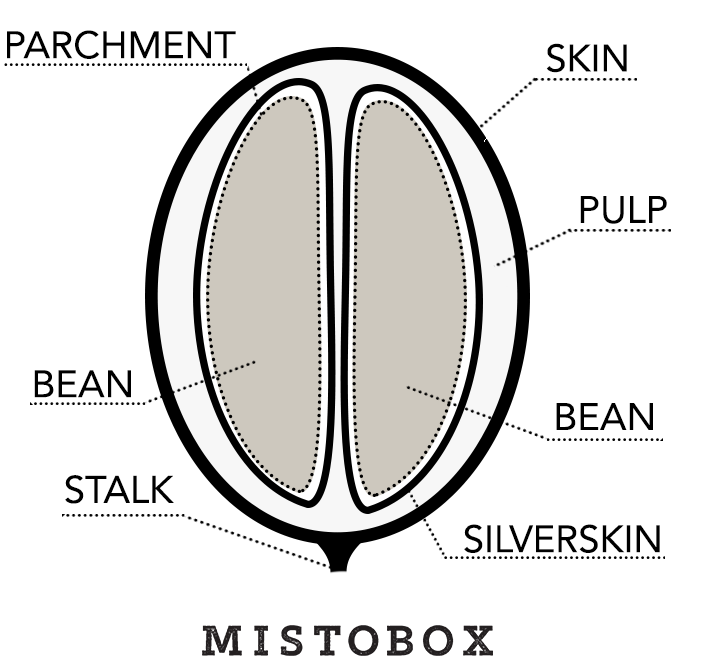
<style>
.page{position:relative;width:720px;height:670px;background:#ffffff}
.page>*{position:absolute;margin:0}
.t1{font:38px "Avenir-Roman";color:#000000;text-transform:uppercase}
</style>
<div class="page">
<p class="t1" style="left:7px;top:30px;width:229px;height:29px">parchment</p>
<p class="t1" style="left:546px;top:43px;width:81px;height:30px">skin</p>
<p class="t1" style="left:580px;top:196px;width:87px;height:28px">pulp</p>
<p class="t1" style="left:34px;top:370px;width:97px;height:28px">bean</p>
<p class="t1" style="left:556px;top:403px;width:97px;height:27px">bean</p>
<p class="t1" style="left:65px;top:475px;width:109px;height:29px">stalk</p>
<p class="t1" style="left:464px;top:524px;width:196px;height:29px">silverskin</p>
</div>
